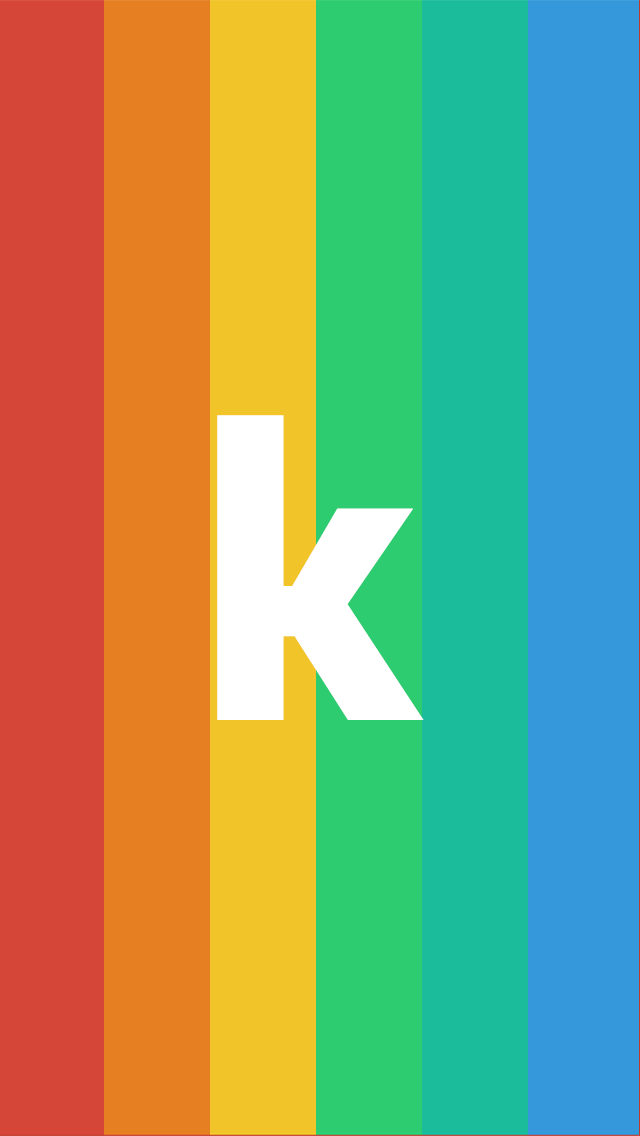
<style>
.page{position:relative;width:640px;height:1136px}
.page>*{position:absolute;margin:0}
.t1{font:400.1px "Roboto-Black";color:#ffffff}
</style>
<div class="page">
<p class="t1" style="left:217px;top:415px;width:207px;height:305px">k</p>
</div>
